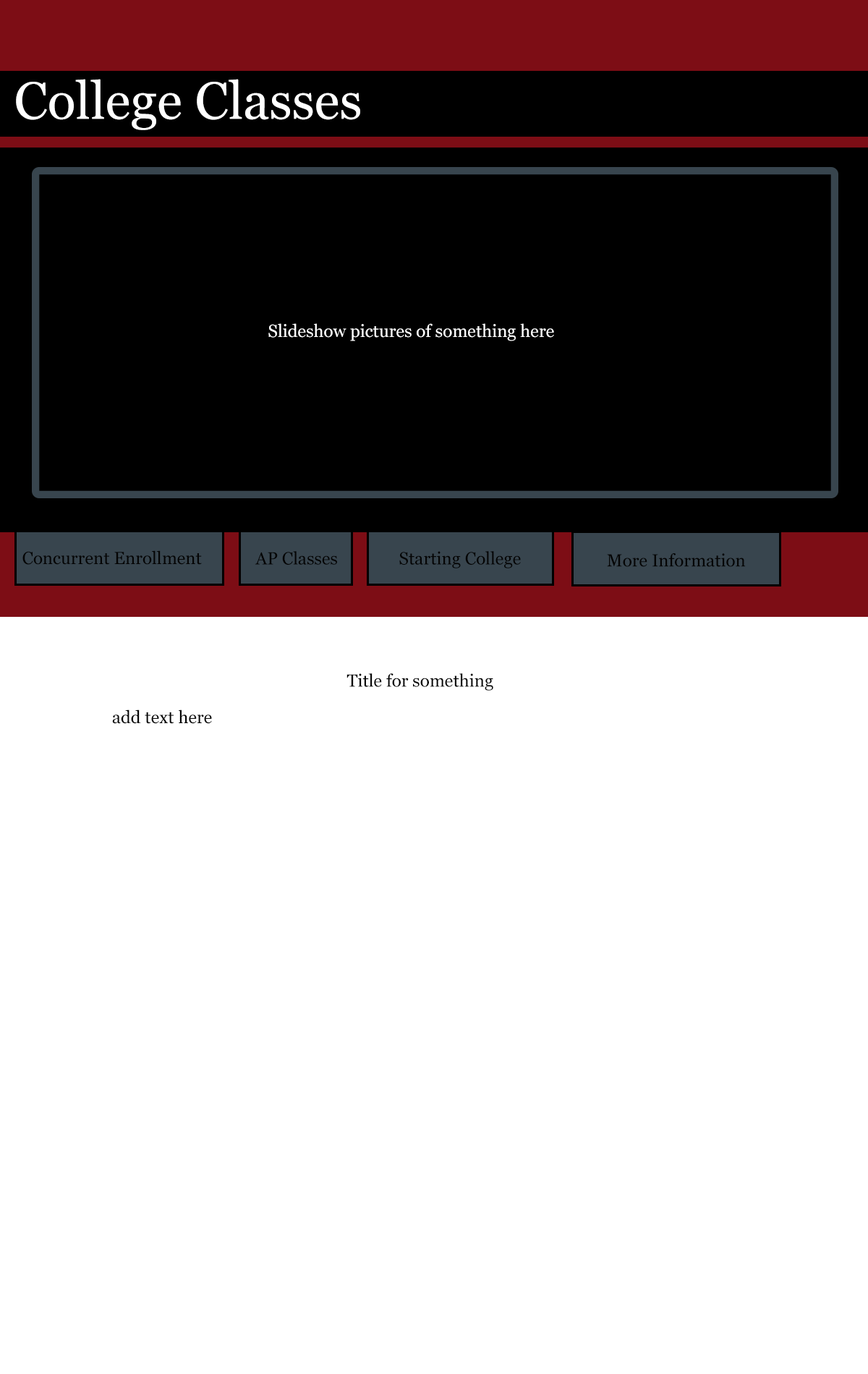
<style>
.page{position:relative;width:868px;height:1374px;background:#ffffff}
.page>*{position:absolute;margin:0}
.t1{font:52.1px "Georgia";color:#ffffff}
.t2{font:17.4px "Georgia";color:#ffffff}
.t3{font:17.4px "Georgia";color:#050505}
</style>
<div class="page">
<p class="t1" style="left:16px;top:79px;width:344px;height:51px">College Classes</p>
<p class="t2" style="left:268px;top:323px;width:286px;height:18px">Slideshow pictures of something here</p>
<p class="t3" style="left:22px;top:550px;width:180px;height:15px">Concurrent Enrollment</p>
<p class="t3" style="left:255px;top:551px;width:82px;height:14px">AP Classes</p>
<p class="t3" style="left:399px;top:551px;width:122px;height:17px">Starting College</p>
<p class="t3" style="left:607px;top:553px;width:139px;height:14px">More Information</p>
<p class="t3" style="left:346px;top:673px;width:147px;height:18px">Title for something</p>
<p class="t3" style="left:112px;top:709px;width:100px;height:15px">add text here</p>
</div>
